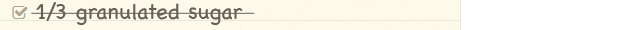
<style>
.page{position:relative;width:631px;height:30px;background:#fdfaeb}
.page>*{position:absolute;margin:0}
.t1{font:22px "Chalkboard";color:#685f56}
</style>
<div class="page">
<p class="t1" style="left:39px;top:2px;width:204px;height:24px">1/3 granulated sugar</p>
</div>
